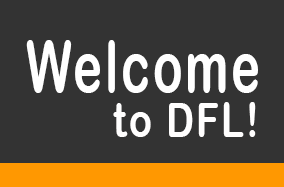
<style>
.page{position:relative;width:284px;height:187px;background:#333333}
.page>*{position:absolute;margin:0}
.t1{font:72px "ArialRoundedMTBold";letter-spacing:0.06em;color:#ffffff;scale:0.68 1}
.t2{font:48px "ArialRoundedMTBold";letter-spacing:0.06em;color:#fffefe;scale:0.79 1}
</style>
<div class="page">
<p class="t1" style="left:26px;top:40px;width:232px;height:53px">Welcome</p>
<p class="t2" style="left:113px;top:102px;width:143px;height:35px">to DFL!</p>
</div>
